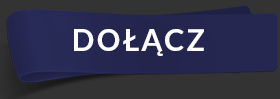
<style>
.page{position:relative;width:280px;height:99px;background:#333333}
.page>*{position:absolute;margin:0}
.t1{font:30px "Lato-Bold";letter-spacing:0.075em;color:#ffffff}
</style>
<div class="page">
<p class="t1" style="left:74px;top:29px;width:130px;height:27px">DOŁĄCZ</p>
</div>
